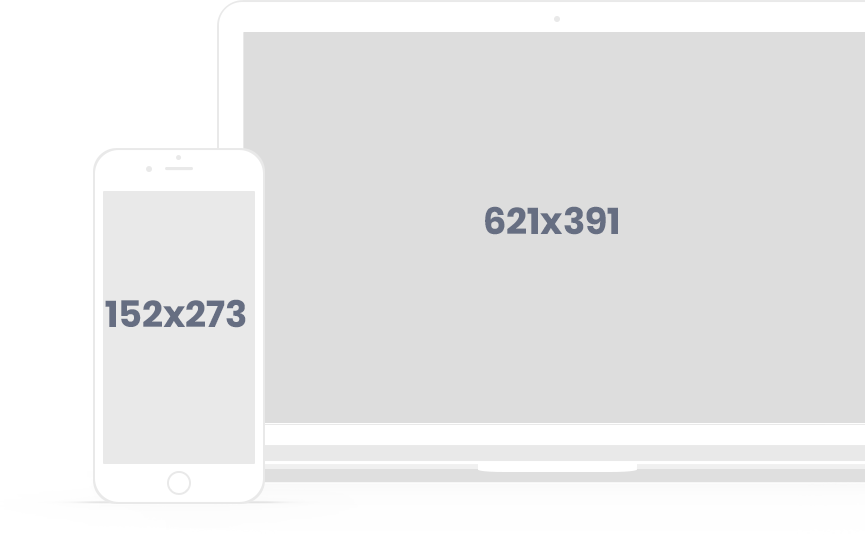
<style>
.page{position:relative;width:865px;height:535px;background:#dddddd}
.page>*{position:absolute;margin:0}
.t1{font:37px "Poppins-Bold";color:#666e82}
</style>
<div class="page">
<p class="t1" style="left:485px;top:206px;width:133px;height:29px">621x391</p>
<p class="t1" style="left:105px;top:299px;width:141px;height:29px">152x273</p>
</div>
